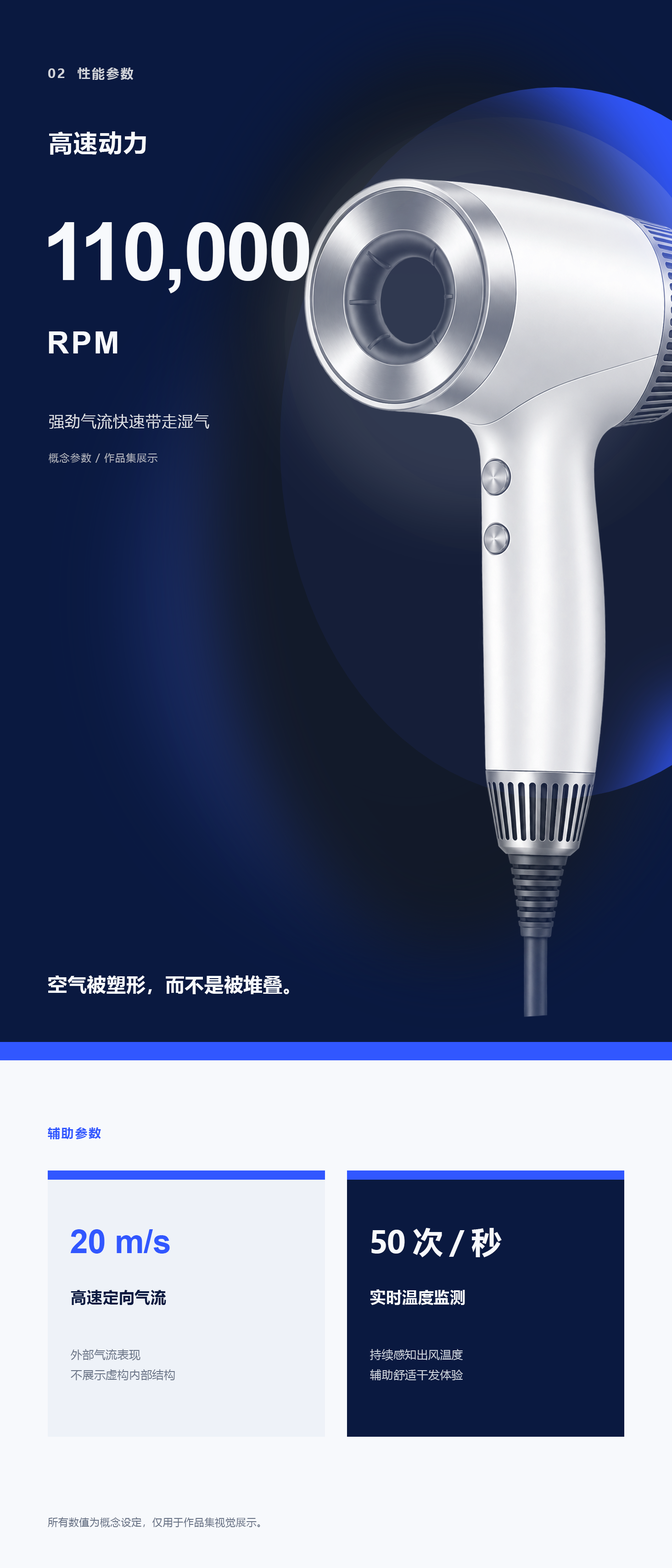
<style>
.page{position:relative;width:672px;height:1568px;background:#0a1940}
.page>*{position:absolute;margin:0}
.t1{font:12.9px "MicrosoftYaHei-Bold";letter-spacing:0.12em;color:#d0d3d9}
.t2{font:23.9px "MicrosoftYaHei-Bold";letter-spacing:0.045em;color:#f7f9fc}
.t3{font:80.8px "Arial-BoldMT";letter-spacing:-0.035em;color:#f7f9fc}
.t4{font:30.8px "Arial-BoldMT";letter-spacing:0.065em;color:#f7f9fc}
.t5{font:15.6px "MicrosoftYaHei";letter-spacing:0.032em;color:#dde0e5}
.t6{font:10.1px "MicrosoftYaHei";letter-spacing:0.07em;color:#b0b3bd}
.t7{font:19.3px "MicrosoftYaHei-Bold";letter-spacing:0.015em;color:#f7f9fc}
.t8{font:12.4px "MicrosoftYaHei-Bold";letter-spacing:0.1em;color:#3157ff}
.t9{font:33px "Arial-BoldMT";letter-spacing:-0.01em;color:#3157ff}
.t10{font:30.3px "MicrosoftYaHei-Bold";letter-spacing:-0.02em;color:#f7f9fc}
.t11{font:15.6px "MicrosoftYaHei-Bold";letter-spacing:0.025em;color:#0a1940}
.t12{font:15.6px "MicrosoftYaHei-Bold";letter-spacing:0.025em;color:#f7f9fc}
.t13{font:11.5px "MicrosoftYaHei";letter-spacing:0.015em;color:#697386}
.t14{font:11.5px "MicrosoftYaHei";letter-spacing:0.015em;color:#cad0da}
.t15{font:10.1px "MicrosoftYaHei";letter-spacing:0.035em;color:#697386}
</style>
<div class="page">
<p class="t1" style="left:48px;top:67px;width:86px;height:13px">02  性能参数</p>
<p class="t2" style="left:49px;top:131px;width:97px;height:24px">高速动力</p>
<p class="t3" style="left:48px;top:222px;width:261px;height:71px">110,000</p>
<p class="t4" style="left:49px;top:331px;width:69px;height:22px">RPM</p>
<p class="t5" style="left:49px;top:414px;width:160px;height:15px">强劲气流快速带走湿气</p>
<p class="t6" style="left:49px;top:453px;width:108px;height:10px">概念参数 / 作品集展示</p>
<p class="t7" style="left:48px;top:975px;width:241px;height:19px">空气被塑形，而不是被堆叠。</p>
<p class="t8" style="left:48px;top:1127px;width:53px;height:12px">辅助参数</p>
<p class="t9" style="left:70px;top:1229px;width:100px;height:25px">20 m/s</p>
<p class="t10" style="left:371px;top:1228px;width:131px;height:29px">50次/秒</p>
<p class="t11" style="left:71px;top:1290px;width:95px;height:15px">高速定向气流</p>
<p class="t12" style="left:370px;top:1289px;width:95px;height:16px">实时温度监测</p>
<p class="t13" style="left:71px;top:1349px;width:104px;height:31px">外部气流表现<br>不展示虚构内部结构</p>
<p class="t14" style="left:370px;top:1349px;width:93px;height:31px">持续感知出风温度<br>辅助舒适干发体验</p>
<p class="t15" style="left:48px;top:1517px;width:212px;height:11px">所有数值为概念设定，仅用于作品集视觉展示。</p>
</div>
